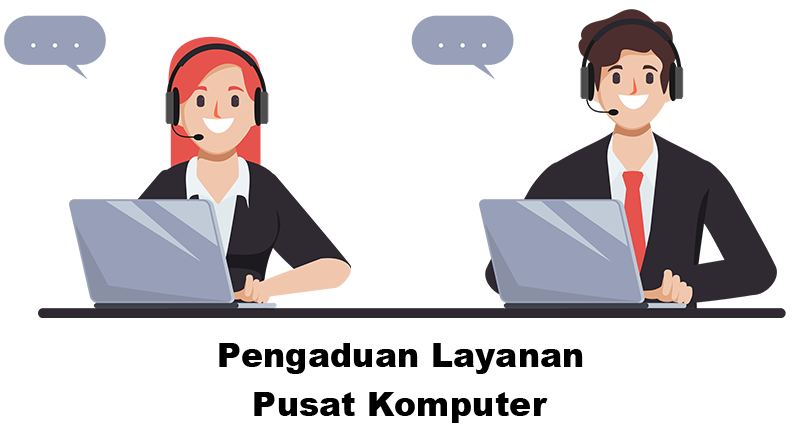
<style>
.page{position:relative;width:800px;height:436px;background:#ffffff}
.page>*{position:absolute;margin:0}
.t1{font:33.5px "Arial-Black";color:#000000}
</style>
<div class="page">
<p class="t1" style="left:219px;top:343px;width:364px;height:31px">Pengaduan Layanan</p>
<p class="t1" style="left:254px;top:392px;width:294px;height:31px">Pusat Komputer</p>
</div>
